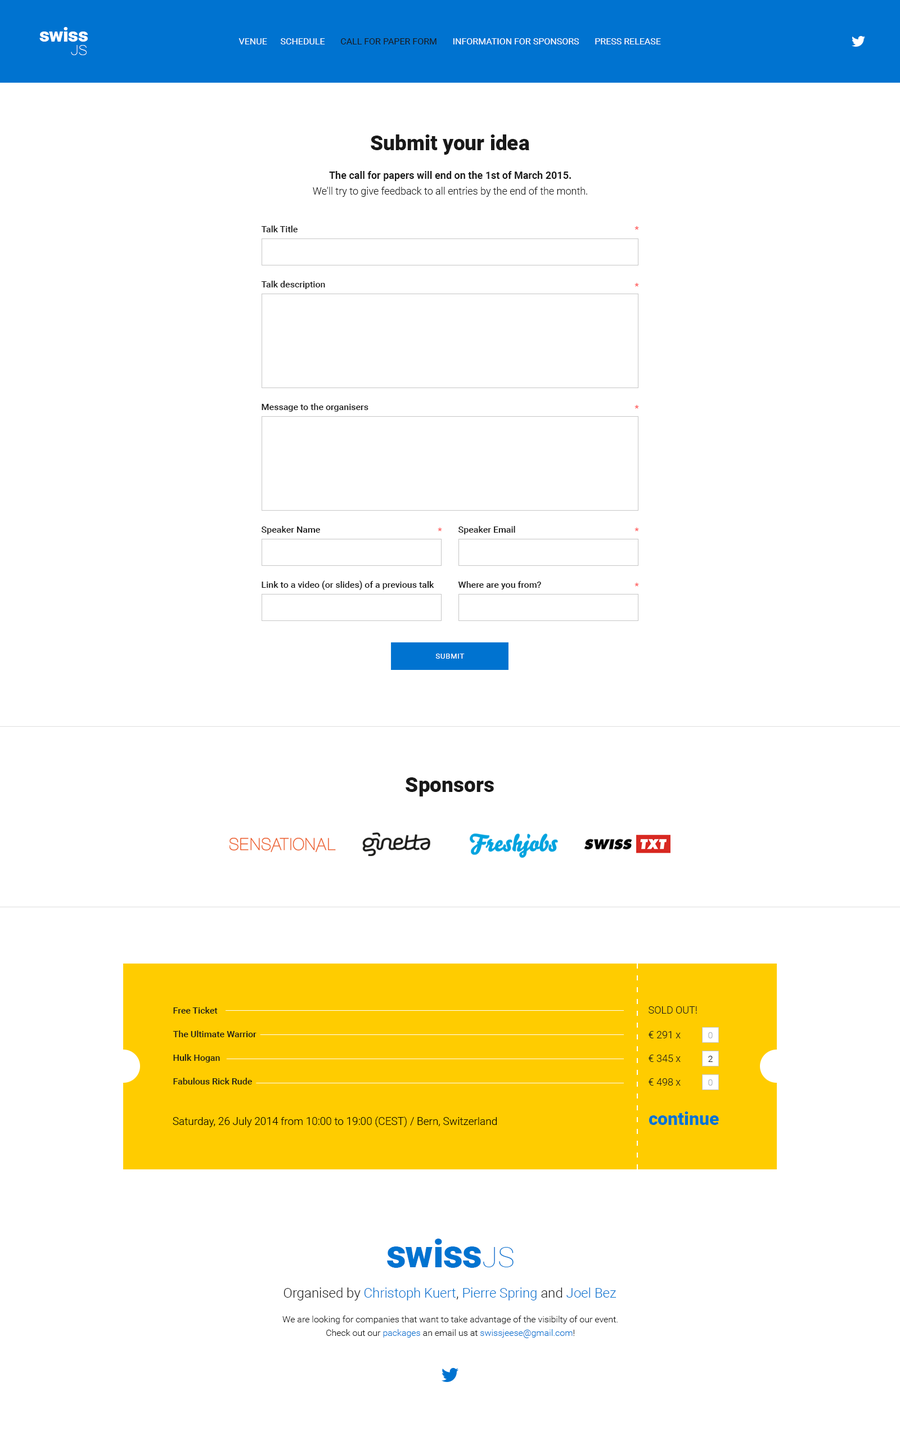
<style>
.page{position:relative;width:900px;height:1445px;background:#ffffff}
.page>*{position:absolute;margin:0}
.t1{font:19.4px "Roboto-Black";letter-spacing:-0.01em;color:#ffffff}
.t2{font:19.4px "Roboto-Black";letter-spacing:-0.02em;color:#ffffff}
.t3{font:19.4px "Roboto-Black";color:#ffffff}
.t4{font:9px "Roboto-Regular";color:#ffffff;text-transform:uppercase}
.t5{font:9px "Roboto-Regular";color:#191919;text-transform:uppercase}
.t6{font:14.4px "Roboto-Thin";color:#ffffff}
.t7{font:20.8px "Roboto-Black";color:#191919}
.t8{font:10.1px/15.8px "Roboto-Light";color:#191919}
.t9{font:10.1px/15.8px "Roboto-Bold";color:#191919}
.t10{font:9px "Roboto-Medium";color:#191919}
.t11{font:9px "Roboto-Medium";color:#ff5454}
.t12{font:7.3px "Roboto-Regular";letter-spacing:0.06em;color:#ffffff;text-transform:uppercase}
.t13{font:9px/23.6px "Roboto-Medium";color:#191919}
.t14{font:10.1px "Roboto-Light";color:#191919;text-transform:uppercase}
.t15{font:10.1px/23.6px "Roboto-Light";color:#191919}
.t16{font:9px "Roboto-Light";color:#a9afb3}
.t17{font:9px "Roboto-Light";color:#191919}
.t18{font:10.7px "Roboto-Light";color:#000000}
.t19{font:18px "Roboto-Black";color:#0074d0}
.t20{font:38.4px "Roboto-Black";letter-spacing:-0.01em;color:#0073d0}
.t21{font:38.4px "Roboto-Black";letter-spacing:-0.02em;color:#0073d0}
.t22{font:38.4px "Roboto-Black";color:#0073d0}
.t23{font:28.3px "Roboto-Thin";color:#0073d0}
.t24{font:13.5px "Roboto-Light";color:#0073d0}
.t25{font:13.5px "Roboto-Light";color:#191919}
.t26{font:9px/13.5px "Roboto-Light";color:#191919}
.t27{font:9px/13.5px "Roboto-Light";color:#0073d0}
</style>
<div class="page">
<p class="t1" style="left:39px;top:27px;width:49px;height:15px"><span class="t2">s</span><span class="t3">w</span>is<span class="t3">s</span></p>
<p class="t4" style="left:239px;top:38px;width:422px;height:6px">Venue      Schedule       <span class="t5">Call for paper form</span>       Information for sponsors       Press release</p>
<p class="t6" style="left:71px;top:45px;width:16px;height:10px">JS</p>
<p class="t7" style="left:371px;top:134px;width:158px;height:21px">Submit your idea</p>
<p class="t8" style="left:313px;top:171px;width:274px;height:26px;text-align:center"><span class="t9">The call for papers will end on the 1st of March 2015.</span><br>We'll try to give feedback to all entries by the end of the month.</p>
<p class="t10" style="left:261px;top:226px;width:37px;height:6px">Talk Title</p>
<p class="t11" style="left:635px;top:226px;width:4px;height:4px">*</p>
<p class="t10" style="left:261px;top:281px;width:64px;height:8px">Talk description</p>
<p class="t11" style="left:635px;top:283px;width:4px;height:4px">*</p>
<p class="t10" style="left:262px;top:403px;width:106px;height:9px">Message to the organisers</p>
<p class="t11" style="left:635px;top:405px;width:4px;height:4px">*</p>
<p class="t10" style="left:262px;top:526px;width:58px;height:8px">Speaker Name</p>
<p class="t11" style="left:438px;top:528px;width:4px;height:4px">*</p>
<p class="t10" style="left:458px;top:526px;width:57px;height:8px">Speaker Email</p>
<p class="t11" style="left:635px;top:528px;width:4px;height:4px">*</p>
<p class="t10" style="left:262px;top:581px;width:172px;height:9px">Link to a video (or slides) of a previous talk</p>
<p class="t10" style="left:458px;top:581px;width:83px;height:9px">Where are you from?</p>
<p class="t11" style="left:635px;top:583px;width:4px;height:4px">*</p>
<p class="t12" style="left:435px;top:654px;width:30px;height:5px">SUBMIT</p>
<p class="t7" style="left:406px;top:777px;width:88px;height:20px">Sponsors</p>
<p class="t13" style="left:173px;top:1007px;width:84px;height:78px">Free Ticket<br>The Ultimate Warrior<br>Hulk Hogan<br>Fabulous Rick Rude</p>
<p class="t14" style="left:649px;top:1006px;width:48px;height:8px">Sold out!</p>
<p class="t15" style="left:649px;top:1031px;width:32px;height:55px">€ 291 x<br>€ 345 x<br>€ 498 x</p>
<p class="t16" style="left:708px;top:1032px;width:5px;height:6px">0</p>
<p class="t17" style="left:708px;top:1056px;width:5px;height:6px">2</p>
<p class="t16" style="left:708px;top:1079px;width:5px;height:7px">0</p>
<p class="t18" style="left:173px;top:1117px;width:324px;height:10px">Saturday, 26 July 2014 from 10:00 to 19:00 (CEST) / Bern, Switzerland</p>
<p class="t19" style="left:649px;top:1112px;width:70px;height:13px">continue</p>
<p class="t20" style="left:387px;top:1239px;width:94px;height:29px"><span class="t21">s</span><span class="t22">w</span>is<span class="t22">s</span></p>
<p class="t23" style="left:483px;top:1247px;width:31px;height:20px">JS</p>
<p class="t24" style="left:284px;top:1288px;width:333px;height:13px"><span class="t25">Organised by </span>Christoph Kuert<span class="t25">, </span>Pierre Spring<span class="t25"> and </span>Joel Bez</p>
<p class="t26" style="left:282px;top:1316px;width:336px;height:22px;text-align:center">We are looking for companies that want to take advantage of the visibilty of our event.<br>Check out our <span class="t27">packages</span> an email us at <span class="t27">swissjeese@gmail.com</span>!</p>
</div>
